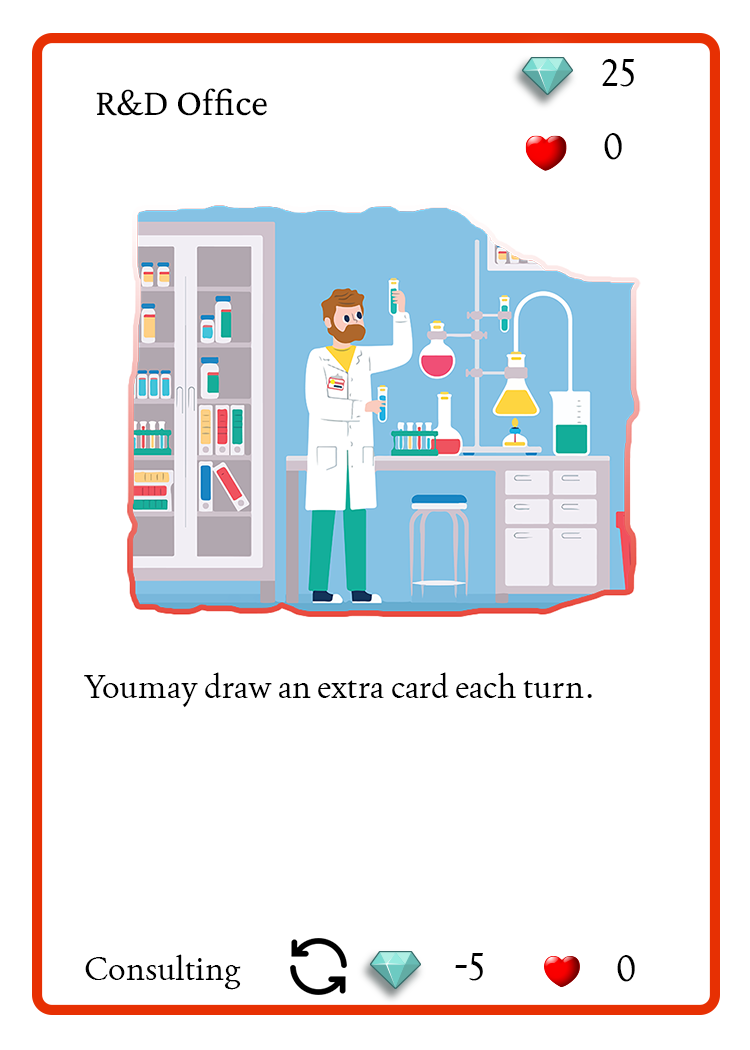
<style>
.page{position:relative;width:750px;height:1050px;background:#ffffff}
.page>*{position:absolute;margin:0}
.t1{font:37.5px "Joan-Regular";color:#000000;text-transform:uppercase}
.t2{font:38.9px "CrimsonPro-Regular";color:#000000}
.t3{font:33.3px "Joan-Regular";color:#000000}
</style>
<div class="page">
<p class="t1" style="left:602px;top:59px;width:32px;height:28px">25</p>
<p class="t2" style="left:96px;top:88px;width:171px;height:28px">R&amp;D Office</p>
<p class="t1" style="left:604px;top:133px;width:18px;height:27px">0</p>
<p class="t3" style="left:84px;top:672px;width:508px;height:36px">Youmay draw an extra card each turn.</p>
<p class="t1" style="left:455px;top:953px;width:28px;height:28px">-5</p>
<p class="t3" style="left:85px;top:954px;width:156px;height:36px">Consulting</p>
<p class="t1" style="left:617px;top:955px;width:18px;height:27px">0</p>
</div>
